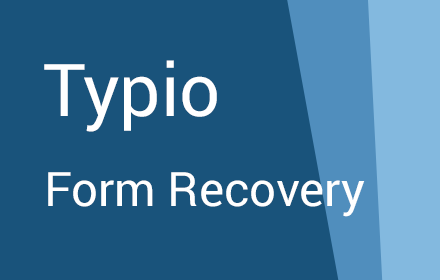
<style>
.page{position:relative;width:440px;height:280px;background:#19537b}
.page>*{position:absolute;margin:0}
.t1{font:72.7px "Roboto-Regular";color:#ffffff}
.t2{font:47.4px "Roboto-Regular";color:#ffffff}
</style>
<div class="page">
<p class="t1" style="left:44px;top:60px;width:173px;height:72px">Typio</p>
<p class="t2" style="left:48px;top:172px;width:317px;height:45px">Form Recovery</p>
</div>
